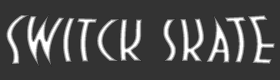
<style>
.page{position:relative;width:280px;height:80px;background:#333333}
.page>*{position:absolute;margin:0}
.t1{font:72px "DecoTechTL"}
</style>
<div class="page">
<p class="t1" style="left:6px;top:14px;width:269px;height:53px">Switck skate</p>
</div>
